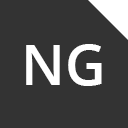
<style>
.page{position:relative;width:128px;height:128px;background:#333333}
.page>*{position:absolute;margin:0}
.t1{font:56px "OpenSans-Semibold";color:#ffffff}
</style>
<div class="page">
<p class="t1" style="left:26px;top:44px;width:76px;height:42px">NG</p>
</div>
